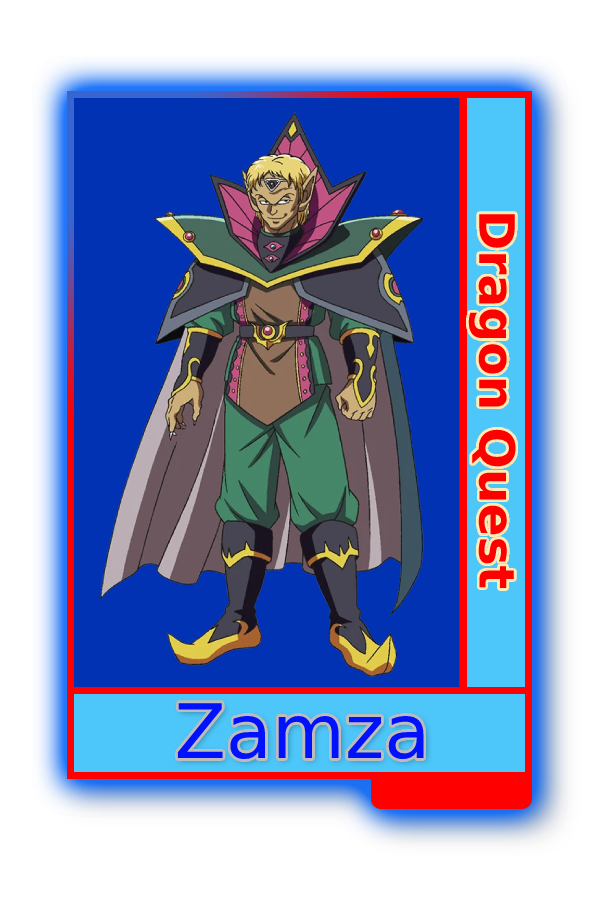
<style>
.page{position:relative;width:600px;height:900px;background:#0032b3}
.page>*{position:absolute;margin:0}
.t1{font:48.8px "MADETOMMY-Bold";color:#ff0000}
.t2{font:75px "CoolveticaRg-Regular";color:#0011fd}
</style>
<div class="page">
<p class="t1" style="left:468px;top:214px;width:48px;height:374px;rotate:90deg">Dragon Quest</p>
<p class="t2" style="left:177px;top:703px;width:247px;height:57px">Zamza</p>
</div>
